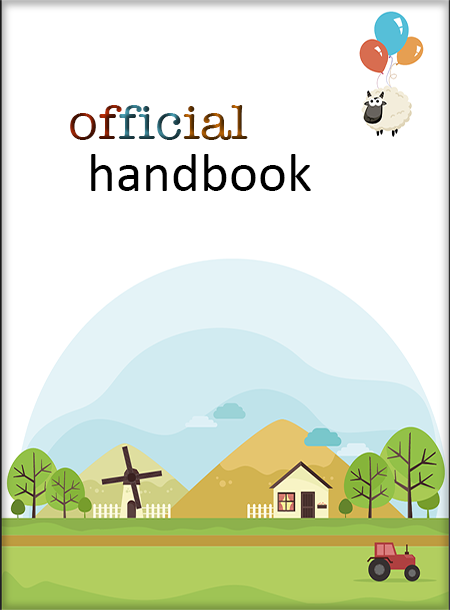
<style>
.page{position:relative;width:450px;height:610px;background:#ffffff}
.page>*{position:absolute;margin:0}
.t1{font:49.7px "AmericanTypewriter";scale:1.11 1}
.t2{font:55px "Calibri";color:#000000}
</style>
<div class="page">
<p class="t1" style="left:70px;top:105px;width:178px;height:35px">official</p>
<p class="t2" style="left:91px;top:154px;width:220px;height:37px">handbook</p>
</div>
